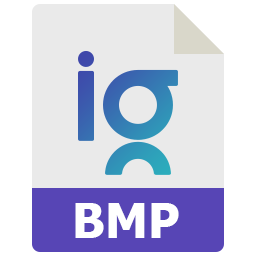
<style>
.page{position:relative;width:256px;height:256px;background:#eaeaea}
.page>*{position:absolute;margin:0}
.t1{font:48px "Tahoma-Bold";color:#ffffff}
</style>
<div class="page">
<p class="t1" style="left:75px;top:203px;width:104px;height:35px">BMP</p>
</div>
